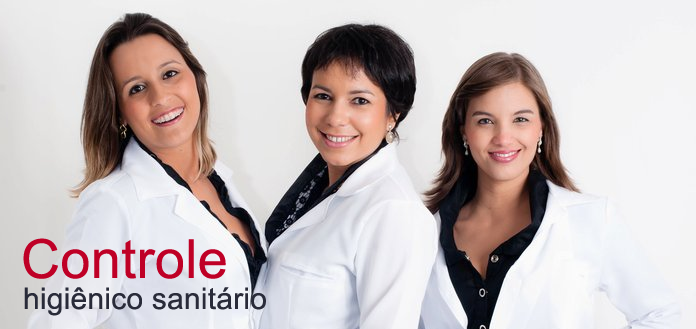
<style>
.page{position:relative;width:696px;height:329px}
.page>*{position:absolute;margin:0}
.t1{font:54px "ArialMT";letter-spacing:0.007em;color:#bf0026}
.t2{font:30px "ArialMT";letter-spacing:0.007em;color:#292b39}
</style>
<div class="page">
<p class="t1" style="left:23px;top:238px;width:203px;height:41px">Controle</p>
<p class="t2" style="left:24px;top:287px;width:242px;height:29px">higiênico sanitário</p>
</div>
